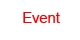
<style>
.page{position:relative;width:80px;height:40px;background:#ffffff}
.page>*{position:absolute;margin:0}
.t1{font:14.7px "ArialMT";color:#ff0000}
</style>
<div class="page">
<p class="t1" style="left:23px;top:12px;width:37px;height:11px">Event</p>
</div>
